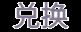
<style>
.page{position:relative;width:81px;height:32px;background:#000000}
.page>*{position:absolute;margin:0}
.t1{font:28px "WebPSD-18463539-0-Regular";color:#837a91;font-weight:bold}
</style>
<div class="page">
<p class="t1" style="left:0px;top:0px;width:81px;height:32px">兑换</p>
</div>
